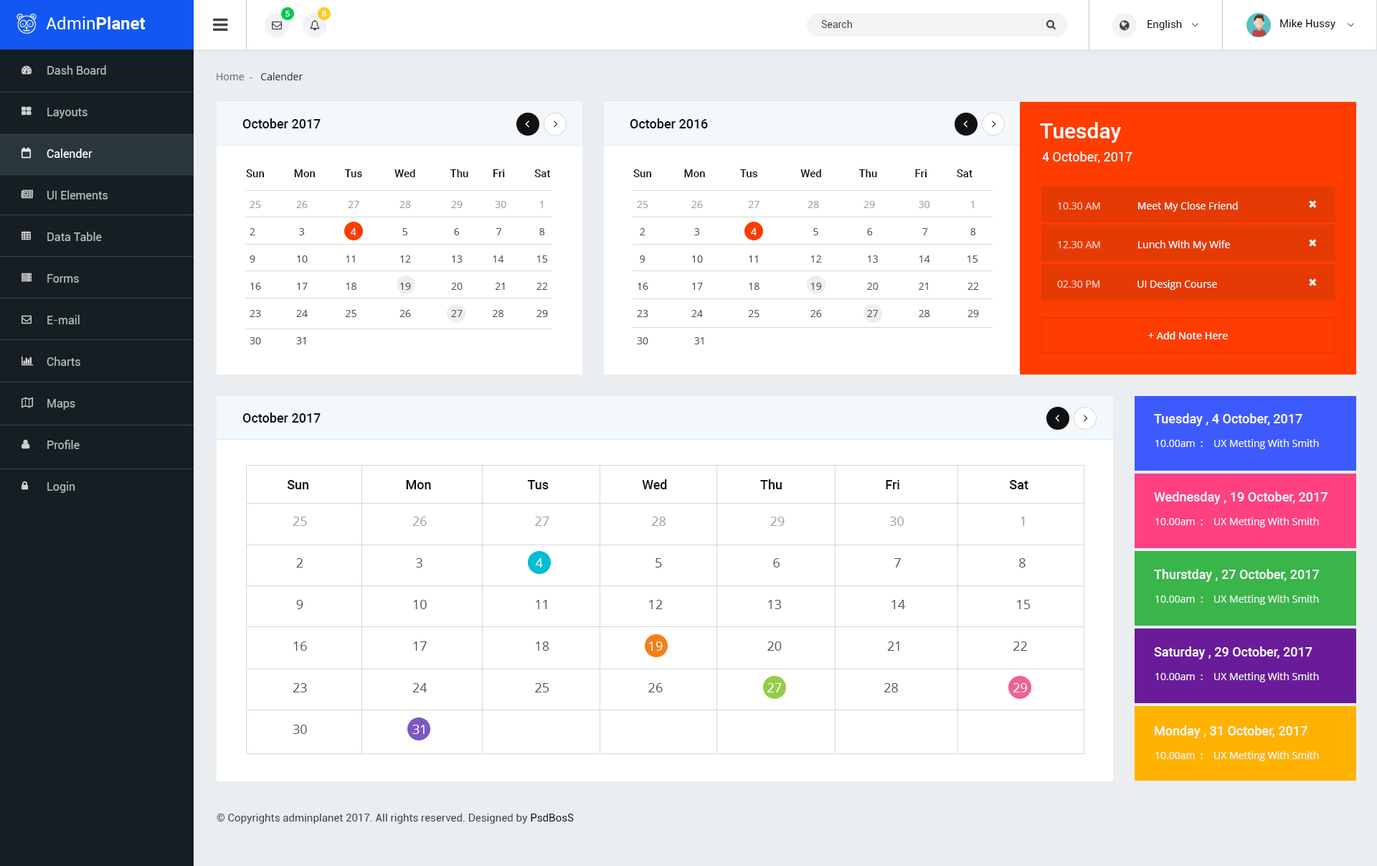
<style>
.page{position:relative;width:1377px;height:866px;background:#ffffff}
.page>*{position:absolute;margin:0}
.t1{font:7.9px "OpenSans-Semibold";color:#ffffff}
.t2{font:10px "Roboto-Regular";color:#444444}
.t3{font:10.8px "Roboto-Regular";color:#111111}
.t4{font:11.5px/41.6px "Roboto-Regular";color:#b9b9b9}
.t5{font:11.5px/41.6px "Roboto-Regular";color:#ffffff}
.t6{font:10px "OpenSans";color:#333333}
.t7{font:10px "OpenSans";color:#707070}
.t8{font:12.9px "Roboto-Medium";color:#111111}
.t9{font:21.5px "Roboto-Medium";color:#ffffff}
.t10{font:12.9px "Roboto-Regular";color:#ffffff}
.t11{font:10.8px "Roboto-Medium";color:#111111}
.t12{font:10px/27.3px "OpenSans";color:#525252}
.t13{font:10px/27.3px "OpenSans";color:#9f9f9f}
.t14{font:10px/27.3px "OpenSans";color:#ffffff}
.t15{font:10px "OpenSans";color:#ffffff}
.t16{font:10px "OpenSans";color:#ffcebe}
.t17{font:10px "OpenSans-Semibold";color:#ffffff}
.t18{font:12.9px "Roboto-Medium";color:#f7f7f7}
.t19{font:10px "OpenSans";color:#f7f7f7}
.t20{font:12.9px/41.6px "OpenSans";color:#525252}
.t21{font:12.9px/41.6px "OpenSans";color:#9f9f9f}
.t22{font:12.9px/41.6px "OpenSans";color:#ffffff}
.t23{font:10.8px "Roboto-Regular";color:#444444}
</style>
<div class="page">
<p class="t1" style="left:285px;top:11px;width:5px;height:5px">5</p>
<p class="t1" style="left:322px;top:11px;width:4px;height:5px">8</p>
<p class="t2" style="left:821px;top:20px;width:31px;height:8px">Search</p>
<p class="t3" style="left:1148px;top:20px;width:34px;height:10px">English</p>
<p class="t3" style="left:1280px;top:19px;width:56px;height:10px">Mike Hussy</p>
<p class="t4" style="left:47px;top:65px;width:61px;height:428px">Dash Board<br>Layouts<br><span class="t5">Calender<br></span>UI Elements<br>Data Table<br>Forms<br>E-mail<br>Charts<br>Maps<br>Profile<br>Login</p>
<p class="t6" style="left:217px;top:72px;width:86px;height:8px"><span class="t7">Home  -   </span>Calender</p>
<p class="t8" style="left:242px;top:118px;width:79px;height:10px">October 2017</p>
<p class="t8" style="left:630px;top:118px;width:78px;height:10px">October 2016</p>
<p class="t9" style="left:1040px;top:122px;width:81px;height:21px">Tuesday</p>
<p class="t10" style="left:1042px;top:151px;width:91px;height:12px">4 October, 2017</p>
<p class="t11" style="left:246px;top:169px;width:305px;height:8px">Sun           Mon           Tus            Wed             Thu         Fri           Sat</p>
<p class="t11" style="left:633px;top:169px;width:340px;height:8px">Sun            Mon             Tus                Wed              Thu              Fri           Sat</p>
<p class="t12" style="left:250px;top:201px;width:298px;height:143px"><span class="t13">25         26         27         28         29      30             1<br></span>2          3        <span class="t14">  4</span>          5          6              7             8<br>9         10        11         12         13     14       15<br>16         17        18         19         20      21            22<br>23         24        25         26         27     28            29<br>30         31</p>
<p class="t12" style="left:637px;top:201px;width:342px;height:143px"><span class="t13">25            26              27                 28                 29          30          1<br></span> 2             3               <span class="t14">4</span>                   5          6                   7          8<br> 9            10              11                  12          13          14              15<br>16            17              18                  19          20          21         22<br>23            24              25                  26          27          28         29<br>30             31</p>
<p class="t15" style="left:1058px;top:202px;width:180px;height:10px"><span class="t16">10.30 AM              </span>Meet My Close Friend</p>
<p class="t15" style="left:1058px;top:240px;width:172px;height:10px"><span class="t16">12.30 AM              </span>Lunch With My Wife</p>
<p class="t15" style="left:1057px;top:280px;width:160px;height:10px"><span class="t16">02.30 PM              </span>UI Design Course</p>
<p class="t17" style="left:1148px;top:331px;width:80px;height:8px">+ Add Note Here</p>
<p class="t8" style="left:242px;top:412px;width:79px;height:11px">October 2017</p>
<p class="t18" style="left:1154px;top:413px;width:149px;height:13px">Tuesday , 4 October, 2017</p>
<p class="t19" style="left:1156px;top:439px;width:163px;height:10px">10.00am  :    UX Metting With Smith</p>
<p class="t8" style="left:287px;top:479px;width:742px;height:10px">Sun                              Mon                              Tus                             Wed                             Thu                                Fri                                  Sat</p>
<p class="t18" style="left:1154px;top:491px;width:174px;height:13px">Wednesday , 19 October, 2017</p>
<p class="t20" style="left:293px;top:516px;width:738px;height:218px"><span class="t21">25                             26                           27                               28                               29                         30                                 1<br></span> 2                              3               <span class="t22">4          4</span>                                5                                 6                                  7                                   8 <br> 9                             10                           11                              12                           13                                 14                                 15<br>16                             17                           18                              <span class="t22">19</span>                           20                                21                               22<br>23                             24                           25                              26                           <span class="t22">27</span>                               28                               <span class="t22">29<br></span>30                             <span class="t22">31</span></p>
<p class="t19" style="left:1156px;top:517px;width:163px;height:10px">10.00am  :    UX Metting With Smith</p>
<p class="t18" style="left:1154px;top:569px;width:166px;height:13px">Thurstday , 27 October, 2017</p>
<p class="t19" style="left:1156px;top:595px;width:163px;height:10px">10.00am  :    UX Metting With Smith</p>
<p class="t18" style="left:1154px;top:646px;width:159px;height:13px">Saturday , 29 October, 2017</p>
<p class="t19" style="left:1156px;top:672px;width:163px;height:10px">10.00am  :    UX Metting With Smith</p>
<p class="t18" style="left:1155px;top:725px;width:153px;height:13px">Monday , 31 October, 2017</p>
<p class="t19" style="left:1156px;top:751px;width:163px;height:10px">10.00am  :    UX Metting With Smith</p>
<p class="t23" style="left:217px;top:813px;width:357px;height:10px">© Copyrights adminplanet 2017. All rights reserved. Designed by <span class="t3">PsdBosS</span></p>
</div>
